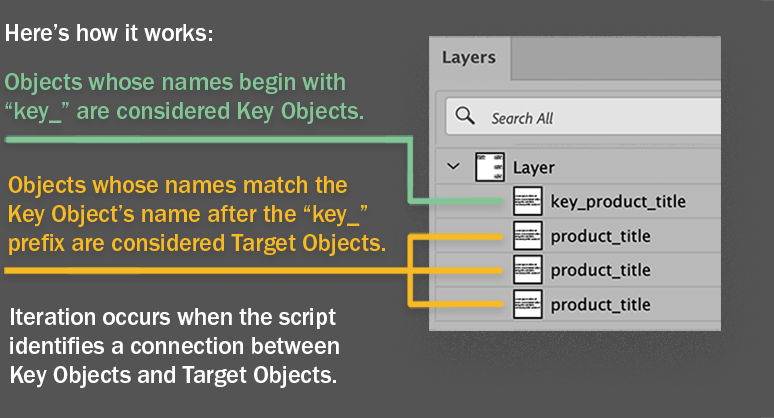
<style>
.page{position:relative;width:774px;height:418px;background:#535453}
.page>*{position:absolute;margin:0}
.t1{font:24.3px "FranklinGothicURW-Med";color:#ffffff}
.t2{font:24.3px "FranklinGothicURW-Med";color:#82c697}
.t3{font:24.3px "FranklinGothicURW-Med";color:#f7b924}
</style>
<div class="page">
<p class="t1" style="left:6px;top:24px;width:206px;height:17px">Here’s how it works:</p>
<p class="t2" style="left:5px;top:73px;width:358px;height:51px">Objects whose names begin with “key_” are considered Key Objects.</p>
<p class="t3" style="left:8px;top:176px;width:377px;height:80px">Objects whose names match the Key Object’s name after the “key_” prefix are considered Target Objects.</p>
<p class="t1" style="left:10px;top:308px;width:329px;height:80px">Iteration occurs when the script identifies a connection between Key Objects and Target Objects.</p>
</div>
